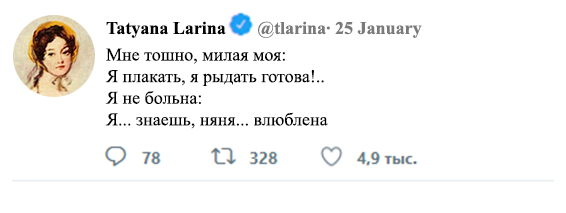
<style>
.page{position:relative;width:566px;height:213px;background:#ffffff}
.page>*{position:absolute;margin:0}
.t1{font:18px "TimesNewRomanPS-BoldMT";color:#7a7a7a}
.t2{font:18px "TimesNewRomanPS-BoldMT";color:#030303}
.t3{font:18px "TimesNewRomanPSMT";color:#030303}
</style>
<div class="page">
<p class="t1" style="left:106px;top:21px;width:316px;height:17px"><span class="t2">Tatyana Larina       </span>@tlarina∙ 25 January</p>
<p class="t3" style="left:105px;top:48px;width:223px;height:81px">Мне тошно, милая моя:<br>Я плакать, я рыдать готова!..<br>Я не больна:<br>Я... знаешь, няня... влюблена</p>
</div>
